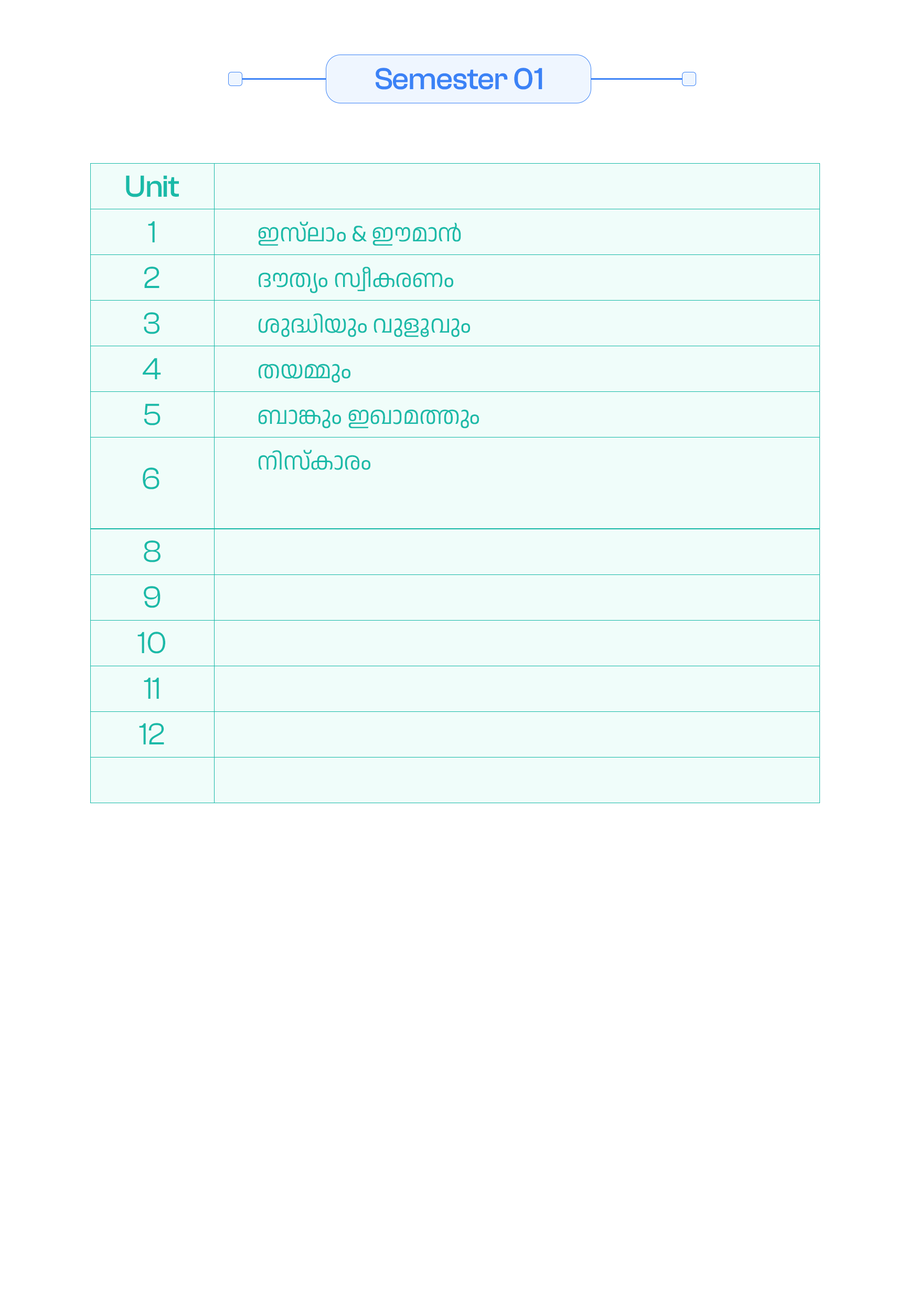
<style>
.page{position:relative;width:917px;height:1301px;background:#ffffff}
.page>*{position:absolute;margin:0}
.t1{font:31.4px "ClashGrotesk-Medium";letter-spacing:-0.02em;color:#3b82f6}
.t2{font:31.4px "ClashGrotesk-Medium";letter-spacing:-0.02em;color:#1abaa8}
.t3{font:31.4px/45.6px "ClashGrotesk-Regular";letter-spacing:-0.02em;color:#1abaa8}
.t4{font:24.1px/45.6px "AnekMalayalam-Regular";letter-spacing:-0.02em;color:#1abaa8}
.t5{font:31.4px "ClashGrotesk-Regular";letter-spacing:-0.02em;color:#1abaa8}
</style>
<div class="page">
<p class="t1" style="left:376px;top:68px;width:166px;height:22px">Semester 01</p>
<p class="t2" style="left:126px;top:175px;width:53px;height:22px">Unit</p>
<p class="t3" style="left:137px;top:221px;width:28px;height:523px;text-align:center">1<br>2<br>3<br>4<br>5<br><br><br>8<br>9<br>10<br>11<br>12</p>
<p class="t4" style="left:258px;top:221px;width:221px;height:249px">ഇസ്‌ലാം &amp; ഈമാൻ<br>ദൗത്യം സ്വീകരണം<br>ശുദ്ധിയും വുളൂവും<br>തയമ്മും<br>ബാങ്കും ഇഖാമത്തും<br>നിസ്കാരം</p>
<p class="t5" style="left:143px;top:467px;width:16px;height:22px">6</p>
</div>
